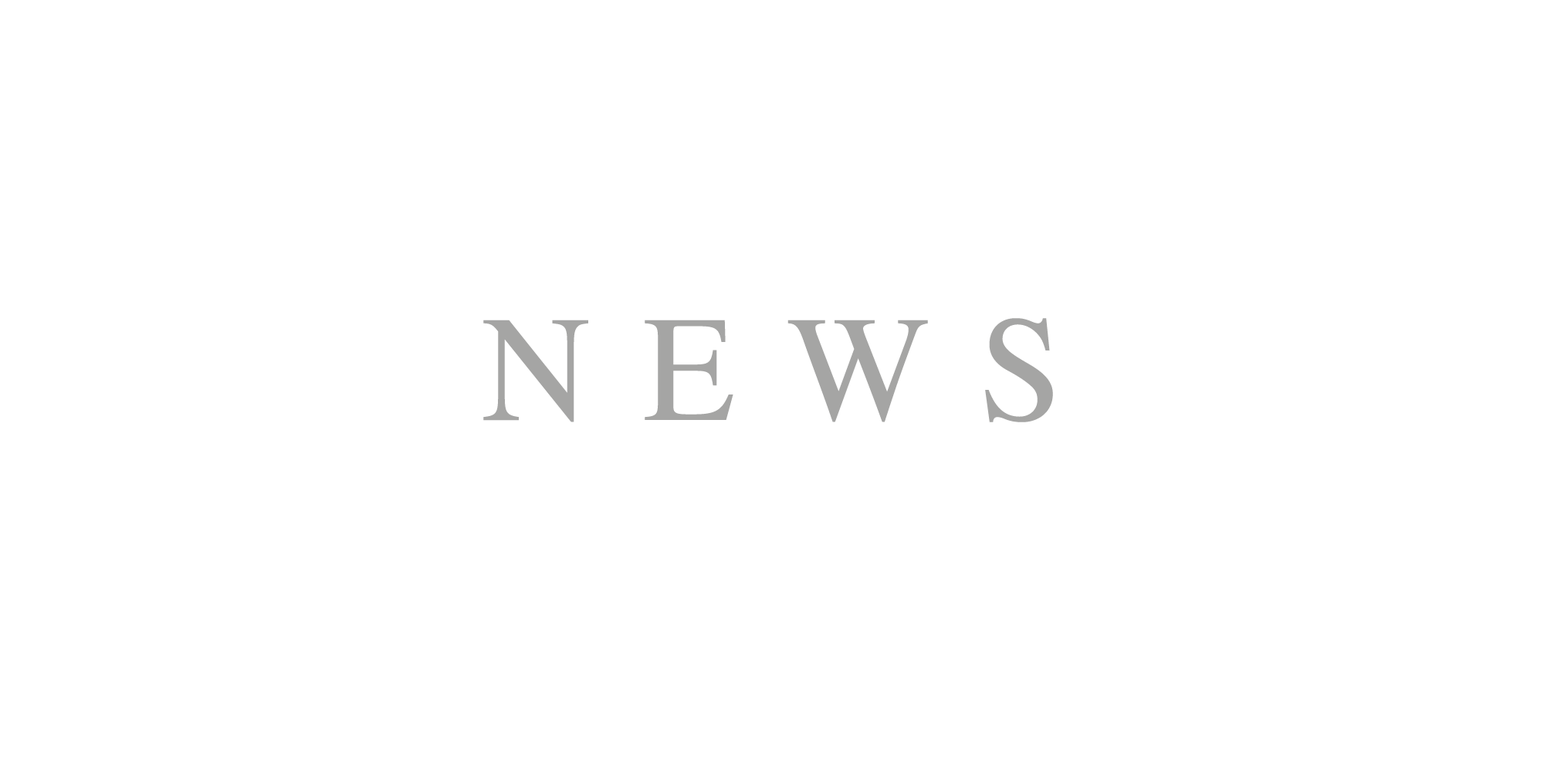
<style>
.page{position:relative;width:1544px;height:772px;background:#ffffff}
.page>*{position:absolute;margin:0}
.t1{font:150.6px "STIXGeneral-Regular";letter-spacing:0.35em;color:#a5a5a4}
</style>
<div class="page">
<p class="t1" style="left:483px;top:318px;width:570px;height:104px">NEWS</p>
</div>
